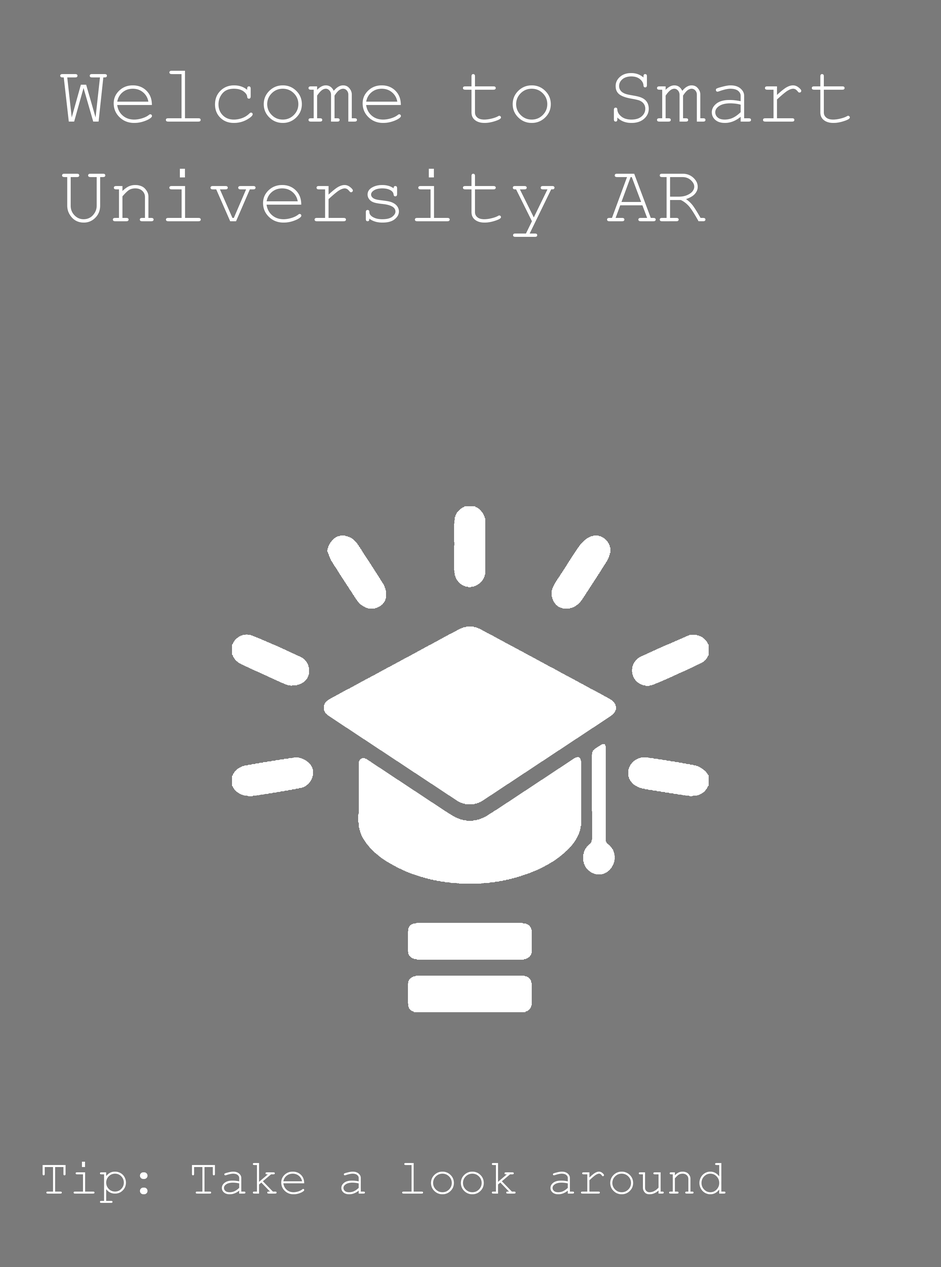
<style>
.page{position:relative;width:941px;height:1267px;background:#7a7a7a}
.page>*{position:absolute;margin:0}
.t1{font:83px "CourierNewPSMT";color:#ffffff}
.t2{font:49.8px "CourierNewPSMT";color:#ffffff}
</style>
<div class="page">
<p class="t1" style="left:60px;top:71px;width:790px;height:166px">Welcome to Smart<br>University AR</p>
<p class="t2" style="left:43px;top:1161px;width:683px;height:41px">Tip: Take a look around</p>
</div>
